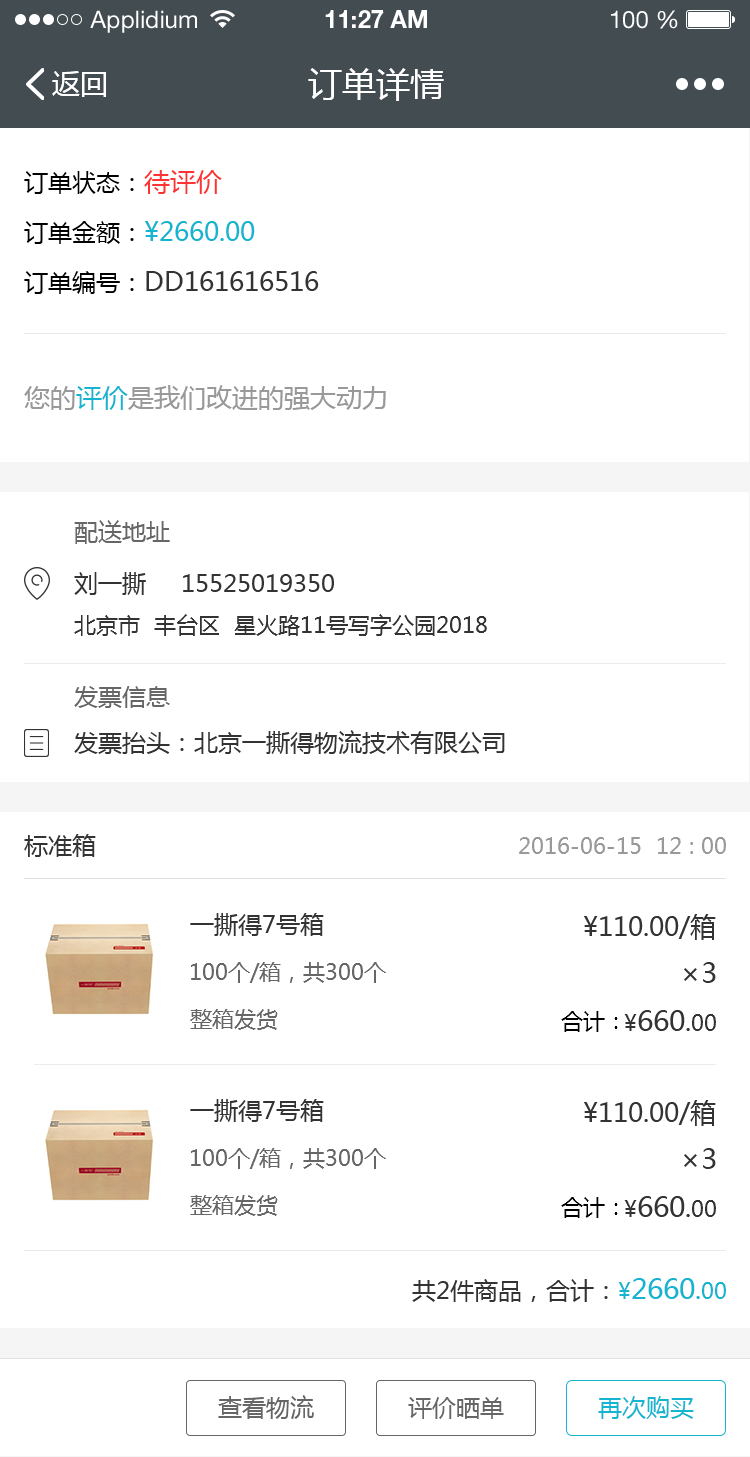
<style>
.page{position:relative;width:750px;height:1457px;background:#ffffff}
.page>*{position:absolute;margin:0}
.t1{font:24px "HelveticaNeueLTStd-Roman";color:#ffffff}
.t2{font:24px "HelveticaNeueLTStd-Bd";color:#ffffff}
.t3{font:28px "MicrosoftYaHei";color:#ffffff}
.t4{font:34px "MicrosoftYaHei";color:#ffffff}
.t5{font:26px/50px "MicrosoftYaHei";color:#333333}
.t6{font:24px/50px "MicrosoftYaHei";color:#000000}
.t7{font:26px/50px "MicrosoftYaHei";color:#fe3333}
.t8{font:26px/50px "MicrosoftYaHei";color:#15b4d0}
.t9{font:26px "MicrosoftYaHei";color:#999999}
.t10{font:26px "MicrosoftYaHei";color:#15b4d0}
.t11{font:24px "MicrosoftYaHei";color:#666666}
.t12{font:24px "MicrosoftYaHei";color:#333333}
.t13{font:22px "MicrosoftYaHei";color:#333333}
.t14{font:22px "MicrosoftYaHei";color:#999999}
.t15{font:26px "MicrosoftYaHei";color:#333333}
.t16{font:22px "MicrosoftYaHei";color:#666666}
.t17{font:28px "MicrosoftYaHei";color:#333333}
.t18{font:22px "MicrosoftYaHei";color:#000000}
.t19{font:22px "MicrosoftYaHei";color:#15b4d0}
.t20{font:28px "MicrosoftYaHei";color:#15b4d0}
.t21{font:24px "MicrosoftYaHei";color:#15b4d0}
</style>
<div class="page">
<p class="t1" style="left:90px;top:10px;width:107px;height:23px">Applidium</p>
<p class="t2" style="left:325px;top:10px;width:102px;height:18px">11:27 AM</p>
<p class="t1" style="left:611px;top:10px;width:67px;height:19px">100 %</p>
<p class="t3" style="left:52px;top:71px;width:54px;height:26px">返回</p>
<p class="t4" style="left:308px;top:68px;width:136px;height:33px">订单详情</p>
<p class="t5" style="left:24px;top:170px;width:295px;height:124px"><span class="t6">订单状态：</span><span class="t7">待评价<br></span><span class="t6">订单金额：</span><span class="t8">¥2660.00<br></span><span class="t6">订单编号：</span>DD161616516</p>
<p class="t9" style="left:24px;top:385px;width:362px;height:25px">您的<span class="t10">评价</span>是我们改进的强大动力</p>
<p class="t11" style="left:74px;top:520px;width:96px;height:24px">配送地址</p>
<p class="t12" style="left:74px;top:572px;width:260px;height:23px">刘一撕     15525019350</p>
<p class="t13" style="left:74px;top:614px;width:413px;height:22px">北京市  丰台区  星火路11号写字公园2018</p>
<p class="t11" style="left:74px;top:686px;width:96px;height:22px">发票信息</p>
<p class="t12" style="left:74px;top:730px;width:431px;height:24px">发票抬头：北京一撕得物流技术有限公司</p>
<p class="t12" style="left:24px;top:834px;width:72px;height:23px">标准箱</p>
<p class="t14" style="left:519px;top:837px;width:207px;height:17px">2016-06-15  12 : 00</p>
<p class="t12" style="left:190px;top:913px;width:134px;height:23px">一撕得7号箱</p>
<p class="t15" style="left:584px;top:914px;width:132px;height:26px">¥110.00/箱</p>
<p class="t16" style="left:191px;top:962px;width:195px;height:21px">100个/箱，共300个</p>
<p class="t17" style="left:684px;top:962px;width:32px;height:21px">×3</p>
<p class="t16" style="left:190px;top:1009px;width:88px;height:21px">整箱发货</p>
<p class="t18" style="left:561px;top:1011px;width:57px;height:21px">合计：</p>
<p class="t17" style="left:624px;top:1010px;width:92px;height:21px"><span class="t13">¥</span>660<span class="t15">.</span><span class="t13">00</span></p>
<p class="t12" style="left:190px;top:1099px;width:134px;height:23px">一撕得7号箱</p>
<p class="t15" style="left:584px;top:1100px;width:132px;height:26px">¥110.00/箱</p>
<p class="t16" style="left:191px;top:1148px;width:195px;height:21px">100个/箱，共300个</p>
<p class="t17" style="left:684px;top:1148px;width:32px;height:21px">×3</p>
<p class="t16" style="left:190px;top:1195px;width:88px;height:21px">整箱发货</p>
<p class="t18" style="left:561px;top:1197px;width:57px;height:21px">合计：</p>
<p class="t17" style="left:624px;top:1196px;width:92px;height:21px"><span class="t13">¥</span>660<span class="t15">.</span><span class="t13">00</span></p>
<p class="t12" style="left:412px;top:1278px;width:314px;height:24px">共2件商品，合计：<span class="t19">¥</span><span class="t20">2660</span><span class="t10">.</span><span class="t19">00</span></p>
<p class="t11" style="left:218px;top:1395px;width:96px;height:24px">查看物流</p>
<p class="t11" style="left:408px;top:1397px;width:96px;height:22px">评价晒单</p>
<p class="t21" style="left:598px;top:1396px;width:96px;height:23px">再次购买</p>
</div>
